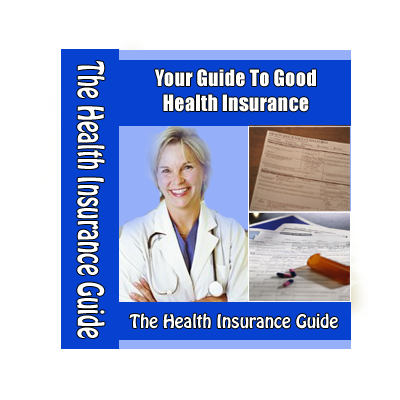
<style>
.page{position:relative;width:400px;height:400px;background:#ffffff}
.page>*{position:absolute;margin:0}
.t1{font:31.2px "Hobo";color:#ffffff;scale:0.71 1}
.t2{font:20.8px "Impact";color:#ffffff}
.t3{font:16.7px "Hobo";color:#ffffff}
</style>
<div class="page">
<p class="t1" style="left:77px;top:61px;width:28px;height:277px;rotate:90deg">The Health Insurance Guide</p>
<p class="t2" style="left:154px;top:69px;width:162px;height:43px;text-align:center">Your Guide To Good <br>Health Insurance</p>
<p class="t3" style="left:129px;top:313px;width:209px;height:16px">The Health Insurance Guide</p>
</div>
